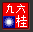
<style>
.page{position:relative;width:33px;height:32px;background:#f20000}
.page>*{position:absolute;margin:0}
.t1{font:10.4px "SimSun";color:#ffffff}
.t2{font:11.7px "SimSun";color:#ffffff}
</style>
<div class="page">
<p class="t1" style="left:6px;top:4px;width:19px;height:9px">九六</p>
<p class="t2" style="left:16px;top:15px;width:11px;height:12px">桂</p>
</div>
